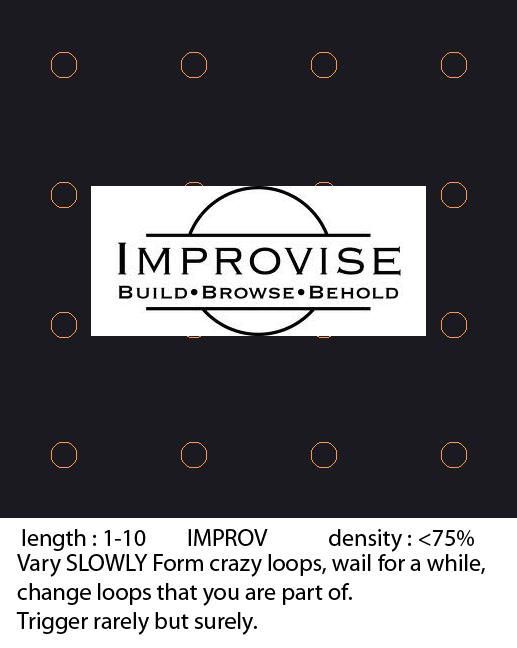
<style>
.page{position:relative;width:517px;height:648px;background:#1b1a20}
.page>*{position:absolute;margin:0}
.t1{font:24px "MyriadPro-Regular";color:#000000}
</style>
<div class="page">
<p class="t1" style="left:22px;top:529px;width:452px;height:23px">length : 1-10        IMPROV            density : &lt;75%</p>
<p class="t1" style="left:16px;top:554px;width:469px;height:81px">Vary SLOWLY Form crazy loops, wail for a while, <br>change loops that you are part of. <br>Trigger rarely but surely.</p>
</div>
